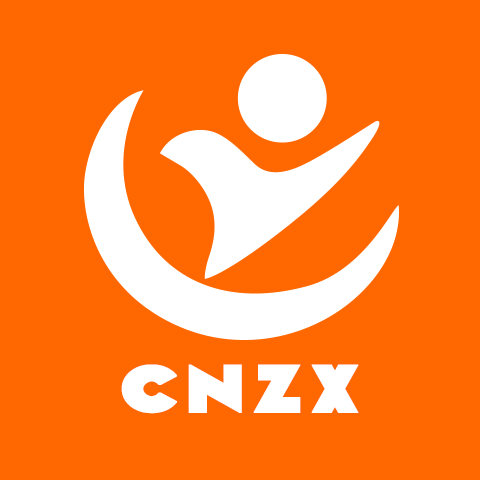
<style>
.page{position:relative;width:480px;height:480px;background:#ff6700}
.page>*{position:absolute;margin:0}
.t1{font:83.3px "CamarRegular";letter-spacing:0.1em;color:#ffffff;font-weight:bold}
</style>
<div class="page">
<p class="t1" style="left:121px;top:364px;width:238px;height:50px">CNZX</p>
</div>
